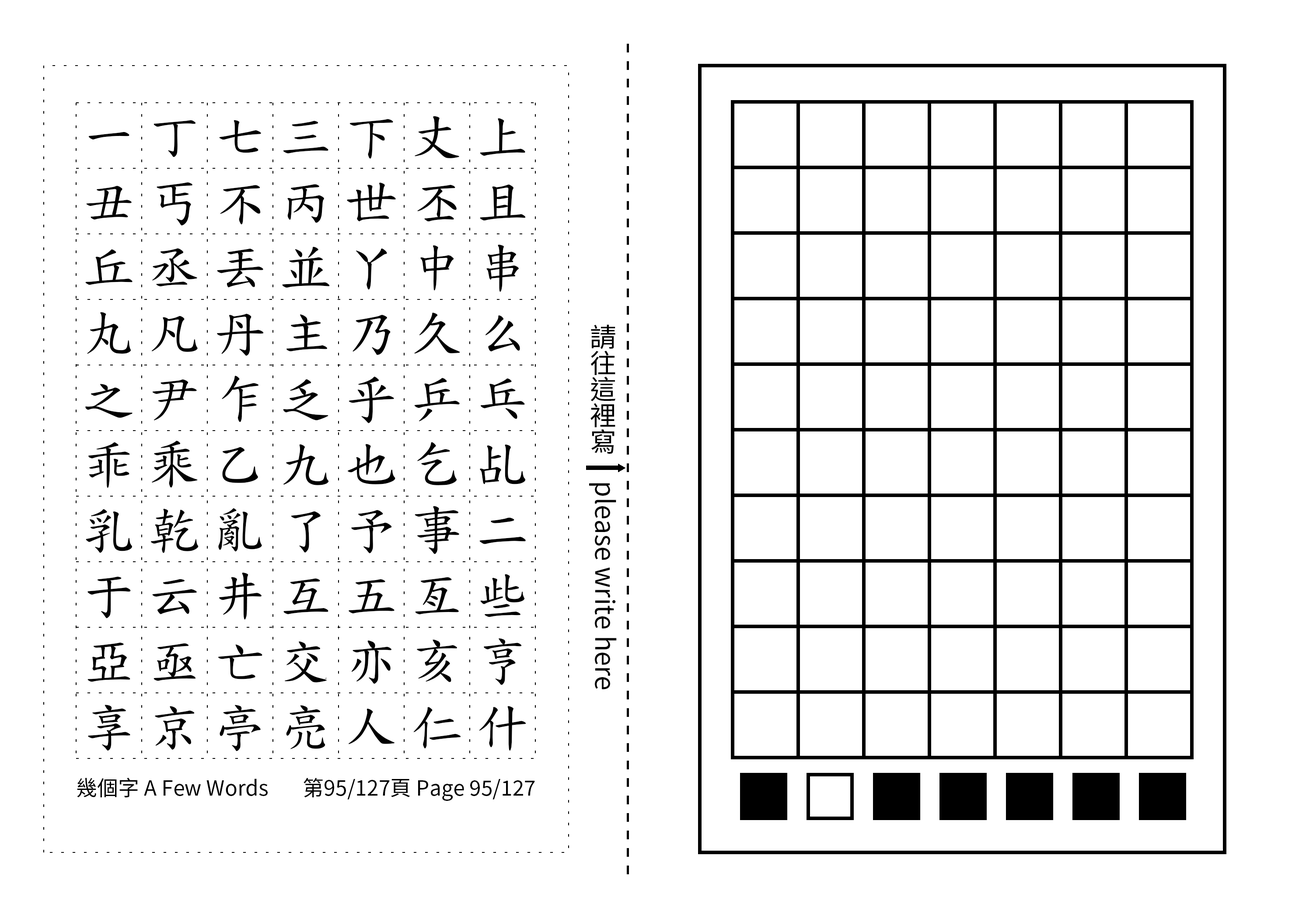
<style>
.page{position:relative;width:1299px;height:918px;background:#ffffff}
.page>*{position:absolute;margin:0}
.t1{font:52.5px/65.6px "TW-Kai-98_1";letter-spacing:0.25em;color:#000000}
.t2{font:26.2px "SourceHanSansTC-Regular";color:#000000}
.t3{font:21px "SourceHanSansTC-Regular";color:#000000}
</style>
<div class="page">
<p class="t1" style="left:85px;top:116px;width:441px;height:636px;text-align:center">一丁七三下丈上丑丐不丙世丕且丘丞丟並丫中串丸凡丹主乃久么之尹乍乏乎乒乓乖乘乙九也乞乩乳乾亂了予事二于云井互五亙些亞亟亡交亦亥亨享京亭亮人仁什</p>
<p class="t2" style="left:589px;top:324px;width:28px;height:366px;text-align:center">請往這裡寫　please write here</p>
<p class="t3" style="left:77px;top:778px;width:191px;height:20px">幾個字 A Few Words</p>
<p class="t3" style="left:303px;top:778px;width:232px;height:23px">第95/127頁 Page 95/127</p>
</div>
